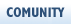
<style>
.page{position:relative;width:71px;height:24px}
.page>*{position:absolute;margin:0}
.t1{font:14px "Humanist521BT-BoldCondensed";color:#2d5078}
</style>
<div class="page">
<p class="t1" style="left:6px;top:7px;width:59px;height:10px">COMUNITY</p>
</div>
